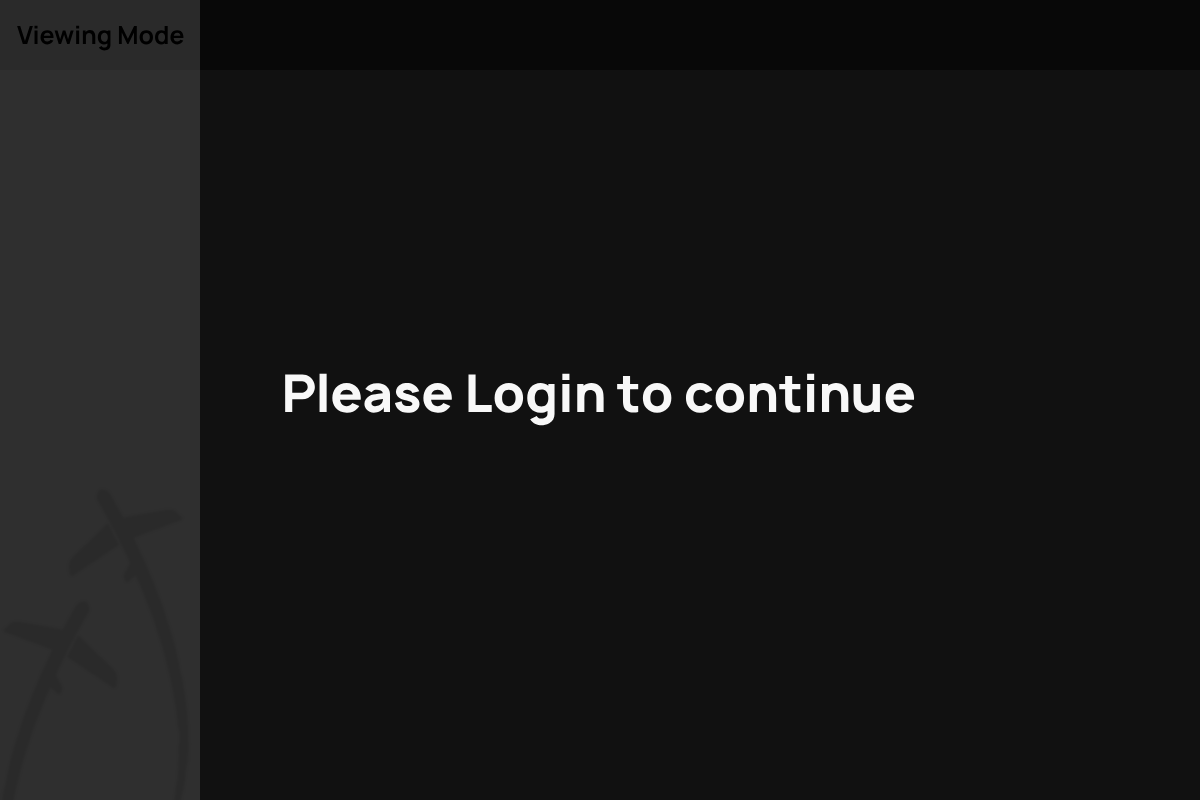
<style>
.page{position:relative;width:1200px;height:800px;background:#111111}
.page>*{position:absolute;margin:0}
.t1{font:50px "Manrope-Bold";color:#f8f8f8}
</style>
<div class="page">
<p class="t1" style="left:285px;top:373px;width:630px;height:53px">Please Login to continue</p>
</div>
